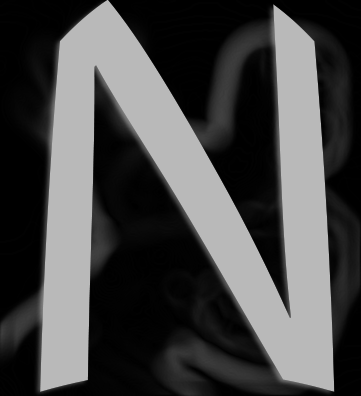
<style>
.page{position:relative;width:361px;height:396px;background:#b9b9b9}
.page>*{position:absolute;margin:0}
.t1{font:472.2px "MyriadPro-Regular";color:#b9b9b9}
</style>
<div class="page">
<p class="t1" style="left:40px;top:0px;width:295px;height:392px">N</p>
</div>
